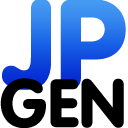
<style>
.page{position:relative;width:128px;height:128px;background:#ffffff}
.page>*{position:absolute;margin:0}
.t1{font:124px "VAGRounded-Black"}
.t2{font:67.4px "VAGRounded-Black";color:#000000}
</style>
<div class="page">
<p class="t1" style="left:2px;top:0px;width:124px;height:90px">JP</p>
<p class="t2" style="left:0px;top:78px;width:124px;height:51px">GEN</p>
</div>
